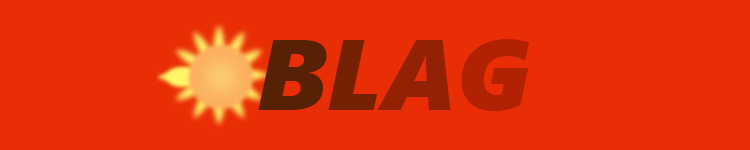
<style>
.page{position:relative;width:750px;height:150px;background:#e92d05}
.page>*{position:absolute;margin:0}
.t1{font:100px "SegoeUIBlack-Italic";color:#572203}
.t2{font:100px "SegoeUIBlack-Italic";color:#752203}
.t3{font:100px "SegoeUIBlack-Italic";color:#932203}
.t4{font:100px "SegoeUIBlack-Italic";color:#b12203}
</style>
<div class="page">
<p class="t1" style="left:258px;top:39px;width:271px;height:72px">B<span class="t2">L</span><span class="t3">A</span><span class="t4">G</span></p>
</div>
